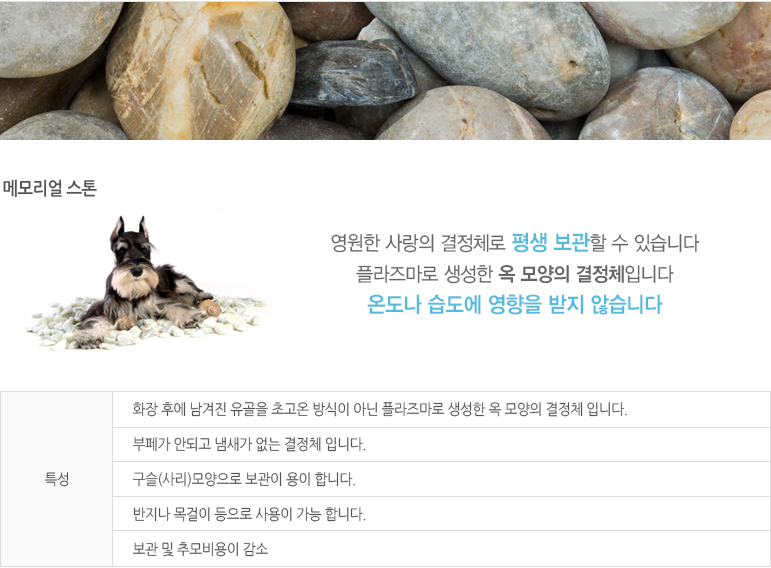
<style>
.page{position:relative;width:771px;height:568px;background:#ffffff}
.page>*{position:absolute;margin:0}
.t1{font:18px "NanumGothicBold";letter-spacing:-0.025em;color:#555555;scale:0.91 1}
.t2{font:22px/31px "YDVYGO34";letter-spacing:-0.025em;color:#56badf;scale:0.91 1}
.t3{font:20px/31px "YDVYGO32";letter-spacing:-0.025em;color:#666666;scale:0.91 1}
.t4{font:20px/31px "YDVYGO34";letter-spacing:-0.025em;color:#666666;scale:0.91 1}
.t5{font:15px/35px "NanumGothic";letter-spacing:-0.025em;color:#555555;scale:0.91 1}
.t6{font:15px "NanumGothic";letter-spacing:-0.025em;color:#555555;scale:0.91 1}
</style>
<div class="page">
<p class="t1" style="left:3px;top:179px;width:94px;height:19px">메모리얼 스톤</p>
<p class="t2" style="left:331px;top:232px;width:369px;height:83px;text-align:center"><span class="t3">영원한 사랑의 결정체로 </span>평생 보관<span class="t3">할 수 있습니다<br>플라즈마로 생성한 </span><span class="t4">옥 모양의 결정체</span><span class="t3">입니다<br></span>온도나 습도에 영향을 받지 않습니다</p>
<p class="t5" style="left:132px;top:401px;width:495px;height:156px">화장 후에 남겨진 유골을 초고온 방식이 아닌 플라즈마로 생성한 옥 모양의 결정체 입니다.<br>부페가 안되고 냄새가 없는 결정체 입니다.<br>구슬(사리)모양으로 보관이 용이 합니다.<br>반지나 목걸이 등으로 사용이 가능 합니다.<br>보관 및 추모비용이 감소</p>
<p class="t6" style="left:44px;top:472px;width:25px;height:15px">특성</p>
</div>
